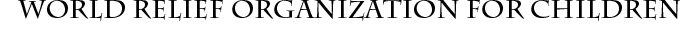
<style>
.page{position:relative;width:700px;height:30px;background:#ffffff}
.page>*{position:absolute;margin:0}
.t1{font:25px "CharlemagneStd-Bold";color:#000000}
</style>
<div class="page">
<p class="t1" style="left:18px;top:0px;width:662px;height:22px">World Relief Organization for Children</p>
</div>
